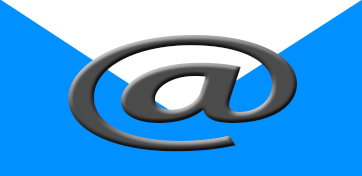
<style>
.page{position:relative;width:362px;height:176px;background:#0090ff}
.page>*{position:absolute;margin:0}
.t1{font:167.1px "MyriadPro-BoldIt";scale:2.02 1}
</style>
<div class="page">
<p class="t1" style="left:68px;top:35px;width:229px;height:117px">@</p>
</div>
